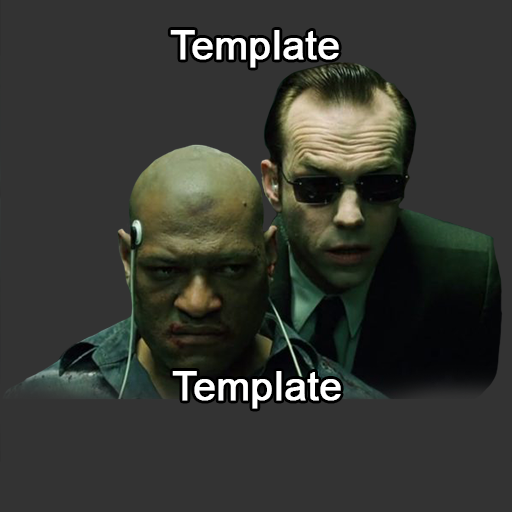
<style>
.page{position:relative;width:512px;height:512px;background:#333333}
.page>*{position:absolute;margin:0}
.t1{font:40px "ArialMT";color:#ffffff;font-weight:bold}
</style>
<div class="page">
<p class="t1" style="left:170px;top:30px;width:169px;height:38px">Template</p>
<p class="t1" style="left:172px;top:371px;width:169px;height:38px">Template</p>
</div>
